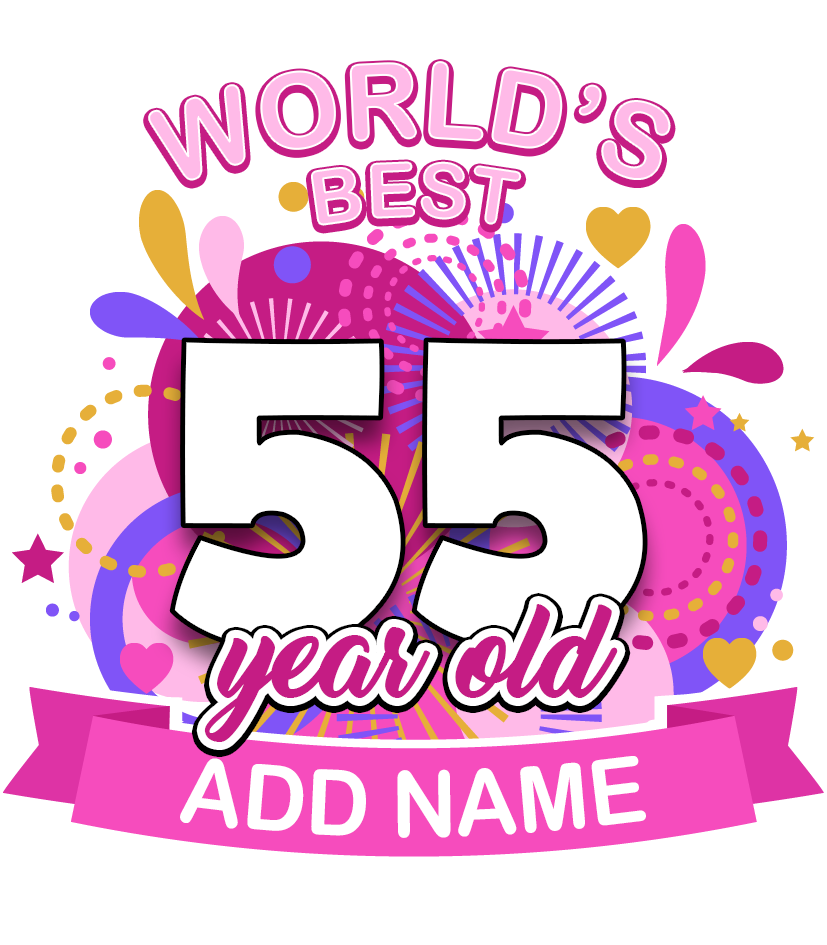
<style>
.page{position:relative;width:827px;height:945px;background:#ffffff}
.page>*{position:absolute;margin:0}
.t1{font:75px "ArialRoundedMTBold";text-transform:uppercase}
.t2{font:75px "ArialRoundedMTBold";color:#ffbae8;text-transform:uppercase}
.t3{font:231.5px "SpaceComics";color:#ffffff;scale:0.95 1}
.t4{font:104.3px "ThinkingOfBetty";color:#c51c84;scale:0.95 1}
.t5{font:91.7px "ArialRoundedMTBold";color:#ffffff;text-transform:uppercase;scale:0.95 1}
</style>
<div class="page">
<p class="t1" style="left:312px;top:165px;width:209px;height:63px">best</p>
<p class="t2" style="left:312px;top:162px;width:209px;height:63px">best</p>
<p class="t3" style="left:172px;top:340px;width:474px;height:312px">55</p>
<p class="t4" style="left:204px;top:606px;width:414px;height:138px">year old</p>
<p class="t4" style="left:204px;top:604px;width:414px;height:138px">year old</p>
<p class="t5" style="left:180px;top:756px;width:466px;height:82px">ADD NAME</p>
</div>
